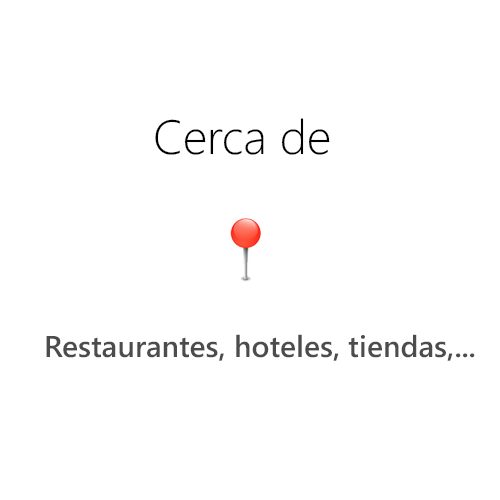
<style>
.page{position:relative;width:500px;height:500px;background:#ffffff}
.page>*{position:absolute;margin:0}
.t1{font:48px "SegoeWP-Light";color:#000000}
.t2{font:30px "SegoeWP-Semibold";color:#4c4c4c}
</style>
<div class="page">
<p class="t1" style="left:155px;top:118px;width:175px;height:37px">Cerca de</p>
<p class="t2" style="left:46px;top:334px;width:429px;height:27px">Restaurantes, hoteles, tiendas,...</p>
</div>
